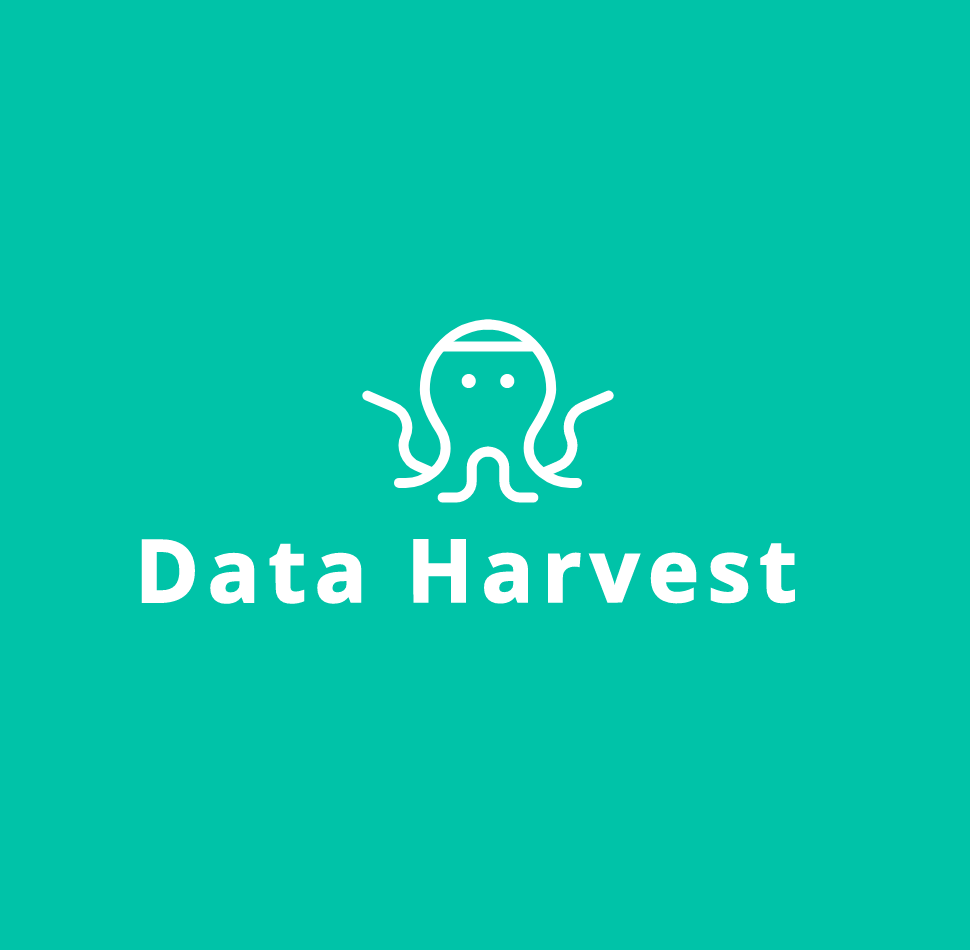
<style>
.page{position:relative;width:970px;height:950px;background:#00c3a8}
.page>*{position:absolute;margin:0}
.t1{font:86.4px "OpenSans-Bold";letter-spacing:0.1em;color:#ffffff}
</style>
<div class="page">
<p class="t1" style="left:139px;top:537px;width:659px;height:69px">Data Harvest</p>
</div>
